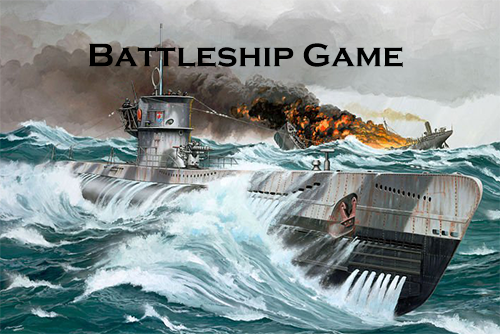
<style>
.page{position:relative;width:500px;height:334px}
.page>*{position:absolute;margin:0}
.t1{font:33.8px "CopperplateGothic-Bold";color:#000000}
</style>
<div class="page">
<p class="t1" style="left:89px;top:43px;width:314px;height:25px">Battleship Game</p>
</div>
